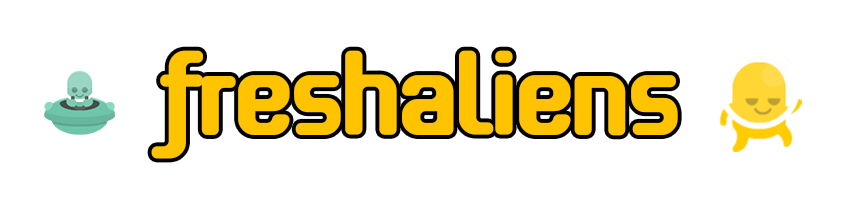
<style>
.page{position:relative;width:842px;height:200px;background:#ffffff}
.page>*{position:absolute;margin:0}
.t1{font:108.3px "effortless";color:#ffc300}
</style>
<div class="page">
<p class="t1" style="left:151px;top:50px;width:527px;height:109px">freshaliens</p>
</div>
